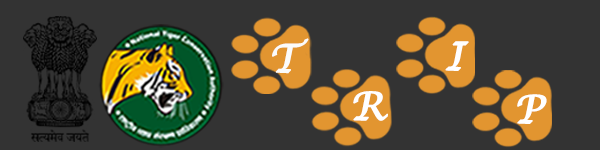
<style>
.page{position:relative;width:600px;height:150px;background:#333333}
.page>*{position:absolute;margin:0}
.t1{font:38.7px "LucidaCalligraphy-Italic";color:#fbfbfa;font-weight:bold}
.t2{font:38.7px "LucidaCalligraphy-Italic";color:#ffffff;font-weight:bold}
</style>
<div class="page">
<p class="t1" style="left:272px;top:38px;width:37px;height:36px">T</p>
<p class="t2" style="left:445px;top:41px;width:24px;height:30px">I</p>
<p class="t2" style="left:353px;top:91px;width:35px;height:30px">R</p>
<p class="t2" style="left:517px;top:94px;width:30px;height:30px">P</p>
</div>
